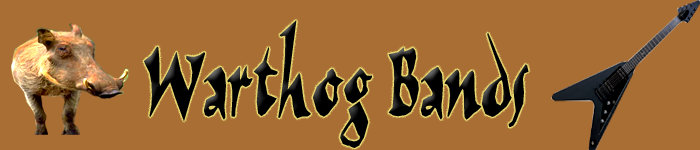
<style>
.page{position:relative;width:700px;height:150px;background:#a96e34}
.page>*{position:absolute;margin:0}
.t1{font:128.9px "Karnack";letter-spacing:0.02em;color:#000000;scale:0.51 1}
</style>
<div class="page">
<p class="t1" style="left:144px;top:20px;width:385px;height:128px">Warthog Bands</p>
</div>
